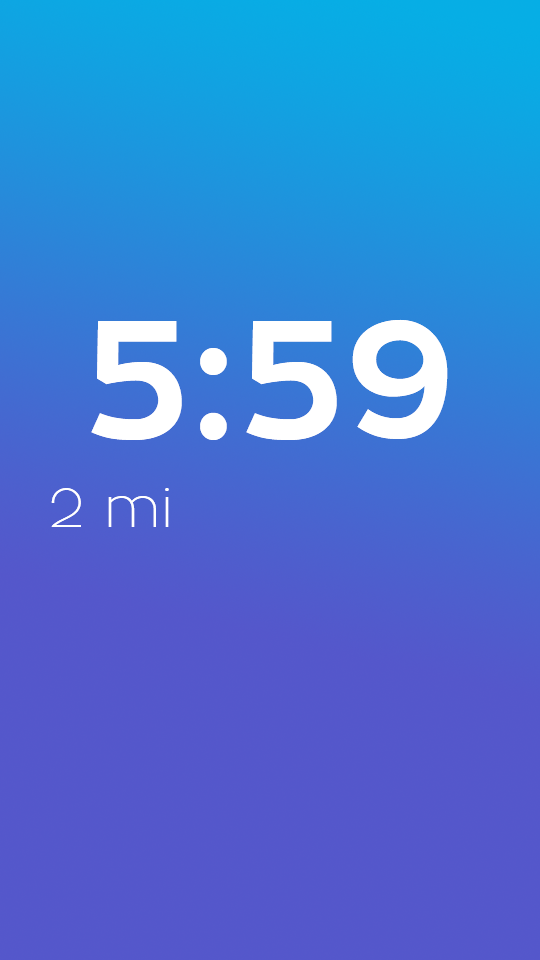
<style>
.page{position:relative;width:540px;height:960px}
.page>*{position:absolute;margin:0}
.t1{font:166.7px "ZonaPro-Bold";letter-spacing:0.02em;color:#ffffff}
.t2{font:55.6px "ZonaPro-Thin";letter-spacing:0.02em;color:#ffffff}
</style>
<div class="page">
<p class="t1" style="left:91px;top:319px;width:357px;height:121px">5:59</p>
<p class="t2" style="left:51px;top:488px;width:118px;height:39px">2 mi</p>
</div>
